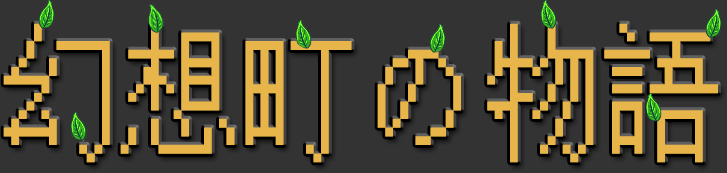
<style>
.page{position:relative;width:727px;height:173px;background:#333333}
.page>*{position:absolute;margin:0}
.t1{font:138.3px "Auraka";color:#e7b549;scale:0.87 1}
</style>
<div class="page">
<p class="t1" style="left:3px;top:23px;width:715px;height:140px">幻想町の物語</p>
</div>
